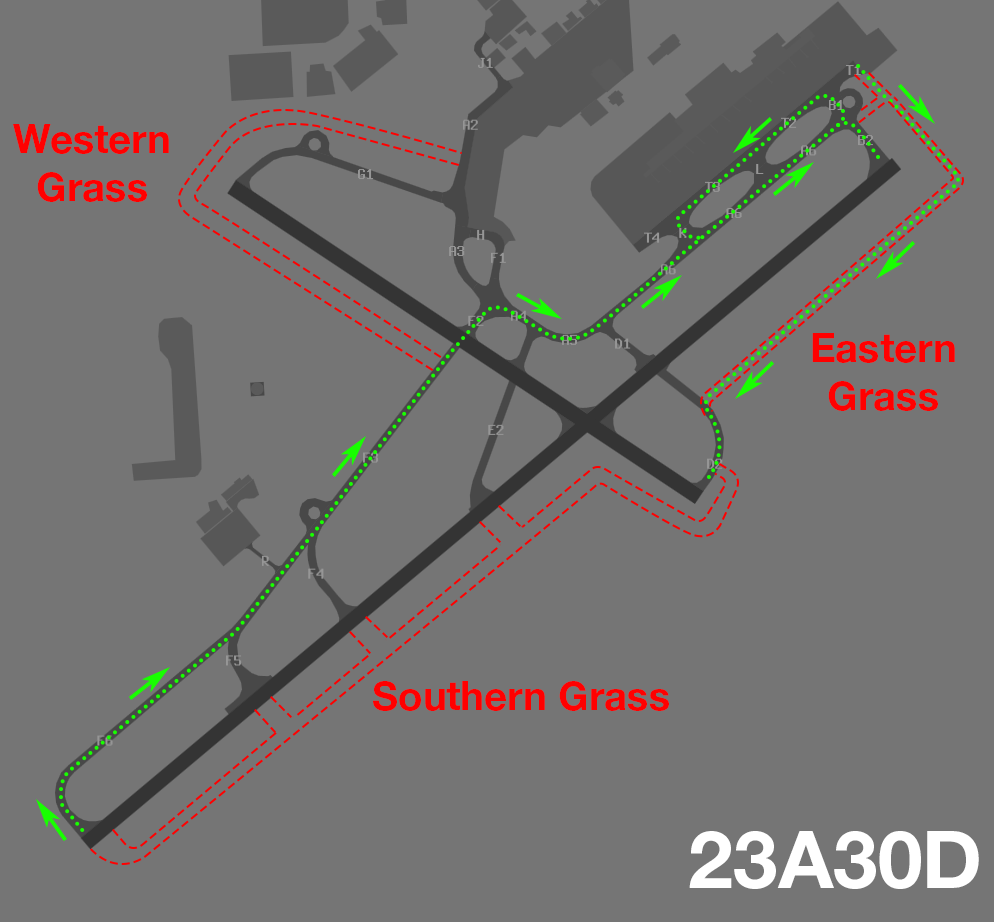
<style>
.page{position:relative;width:994px;height:922px;background:#757575}
.page>*{position:absolute;margin:0}
.t1{font:40px "HelveticaNeueLTStd-Bd";color:#ff0000}
.t2{font:80.2px "HelveticaNeueLTStd-Bd";color:#ffffff}
</style>
<div class="page">
<p class="t1" style="left:13px;top:124px;width:156px;height:78px;text-align:center">Western<br>Grass</p>
<p class="t1" style="left:812px;top:333px;width:143px;height:78px;text-align:center">Eastern<br>Grass</p>
<p class="t1" style="left:373px;top:681px;width:296px;height:30px">Southern Grass</p>
<p class="t2" style="left:689px;top:831px;width:290px;height:58px">23A30D</p>
</div>
